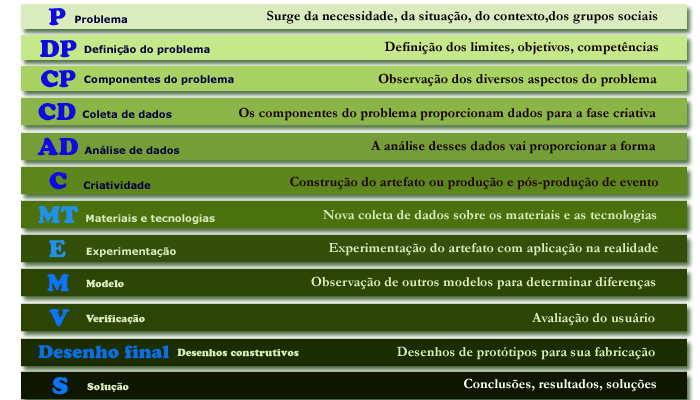
<style>
.page{position:relative;width:700px;height:400px}
.page>*{position:absolute;margin:0}
.t1{font:24px "CooperBlackStd";color:#0f0ae3}
.t2{font:10px "Verdana-Bold";color:#040238}
.t3{font:14px "Garamond-Bold";color:#060000}
.t4{font:14px "Garamond-Bold";color:#120101}
.t5{font:14px "Garamond-Bold";color:#100101}
.t6{font:14px "Garamond-Bold";color:#1c0101}
.t7{font:14px "Garamond-Bold";color:#160101}
.t8{font:14px "Garamond-Bold";color:#1f0202}
.t9{font:24px "CooperBlackStd";color:#2192e9}
.t10{font:10px "Verdana-Bold";color:#daecbe}
.t11{font:14px "Garamond-Bold";color:#daecbe}
.t12{font:24px "CooperBlackStd";color:#0b74f7}
.t13{font:10px "CooperBlackStd";color:#daecbe}
.t14{font:18px "CooperBlackStd";color:#0b6ee7}
.t15{font:14px "Garamond-Bold";color:#ffffff}
</style>
<div class="page">
<p class="t1" style="left:48px;top:8px;width:18px;height:18px">P</p>
<p class="t2" style="left:75px;top:15px;width:52px;height:8px">Problema</p>
<p class="t3" style="left:267px;top:10px;width:391px;height:14px">Surge da necessidade, da situação, do contexto,dos grupos sociais</p>
<p class="t1" style="left:40px;top:40px;width:37px;height:18px">DP</p>
<p class="t4" style="left:384px;top:41px;width:274px;height:14px">Definição dos limites, objetivos, competências</p>
<p class="t2" style="left:84px;top:45px;width:126px;height:10px">Definição do problema</p>
<p class="t1" style="left:41px;top:70px;width:35px;height:18px">CP</p>
<p class="t2" style="left:84px;top:75px;width:150px;height:10px">Componentes do problema</p>
<p class="t5" style="left:378px;top:73px;width:279px;height:14px">Observação dos diversos aspectos do problema</p>
<p class="t1" style="left:38px;top:103px;width:38px;height:18px">CD</p>
<p class="t2" style="left:82px;top:110px;width:90px;height:8px">Coleta de dados</p>
<p class="t6" style="left:239px;top:107px;width:417px;height:14px">Os componentes do problema proporcionam dados para a fase criativa</p>
<p class="t1" style="left:37px;top:137px;width:41px;height:19px">AD</p>
<p class="t2" style="left:84px;top:145px;width:96px;height:9px">Análise de dados</p>
<p class="t7" style="left:371px;top:140px;width:285px;height:14px">A análise desses dados vai proporcionar a forma</p>
<p class="t1" style="left:49px;top:172px;width:18px;height:18px">C</p>
<p class="t2" style="left:83px;top:181px;width:68px;height:8px">Criatividade</p>
<p class="t8" style="left:290px;top:176px;width:368px;height:14px">Construção do artefato ou produção e pós-produção de evento</p>
<p class="t9" style="left:38px;top:206px;width:41px;height:18px">MT</p>
<p class="t10" style="left:86px;top:214px;width:129px;height:10px">Materiais e tecnologias</p>
<p class="t11" style="left:323px;top:210px;width:334px;height:13px">Nova coleta de dados sobre os materiais e as tecnologias</p>
<p class="t9" style="left:49px;top:239px;width:17px;height:19px">E</p>
<p class="t11" style="left:329px;top:243px;width:329px;height:13px">Experimentação do artefato com aplicação na realidade</p>
<p class="t10" style="left:86px;top:247px;width:90px;height:10px">Experimentação</p>
<p class="t12" style="left:47px;top:274px;width:22px;height:18px">M</p>
<p class="t13" style="left:86px;top:279px;width:38px;height:9px">Modelo</p>
<p class="t11" style="left:311px;top:276px;width:345px;height:14px">Observação de outros modelos para determinar diferenças</p>
<p class="t12" style="left:49px;top:309px;width:21px;height:18px">V</p>
<p class="t13" style="left:86px;top:314px;width:59px;height:10px">Verificação</p>
<p class="t11" style="left:532px;top:312px;width:123px;height:14px">Avaliação do usuário</p>
<p class="t14" style="left:38px;top:345px;width:131px;height:14px">Desenho final</p>
<p class="t13" style="left:177px;top:348px;width:122px;height:9px">Desenhos construtivos</p>
<p class="t11" style="left:397px;top:346px;width:258px;height:14px">Desenhos de protótipos para sua fabricação</p>
<p class="t12" style="left:52px;top:377px;width:16px;height:18px">S</p>
<p class="t13" style="left:87px;top:382px;width:42px;height:10px">Solução</p>
<p class="t15" style="left:464px;top:378px;width:192px;height:14px">Conclusões, resultados, soluções</p>
</div>
